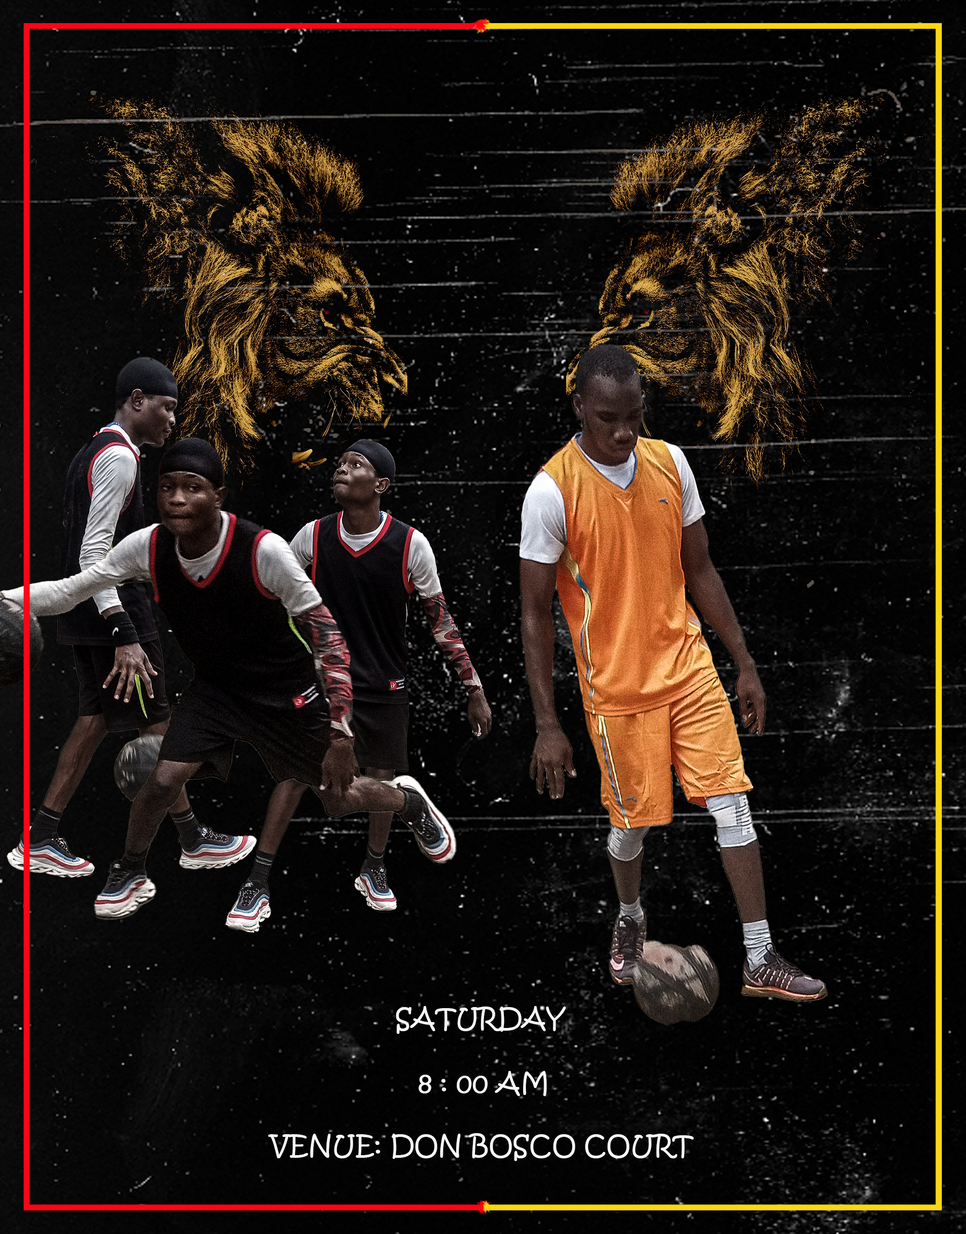
<style>
.page{position:relative;width:966px;height:1234px}
.page>*{position:absolute;margin:0}
.t1{font:26.8px "KristenITC-Regular";color:#f8f8f8}
</style>
<div class="page">
<p class="t1" style="left:396px;top:1006px;width:170px;height:28px">SATURDAY</p>
<p class="t1" style="left:419px;top:1071px;width:128px;height:25px">8 : 00 AM</p>
<p class="t1" style="left:268px;top:1133px;width:426px;height:28px">VENUE: DON BOSCO COURT</p>
</div>
